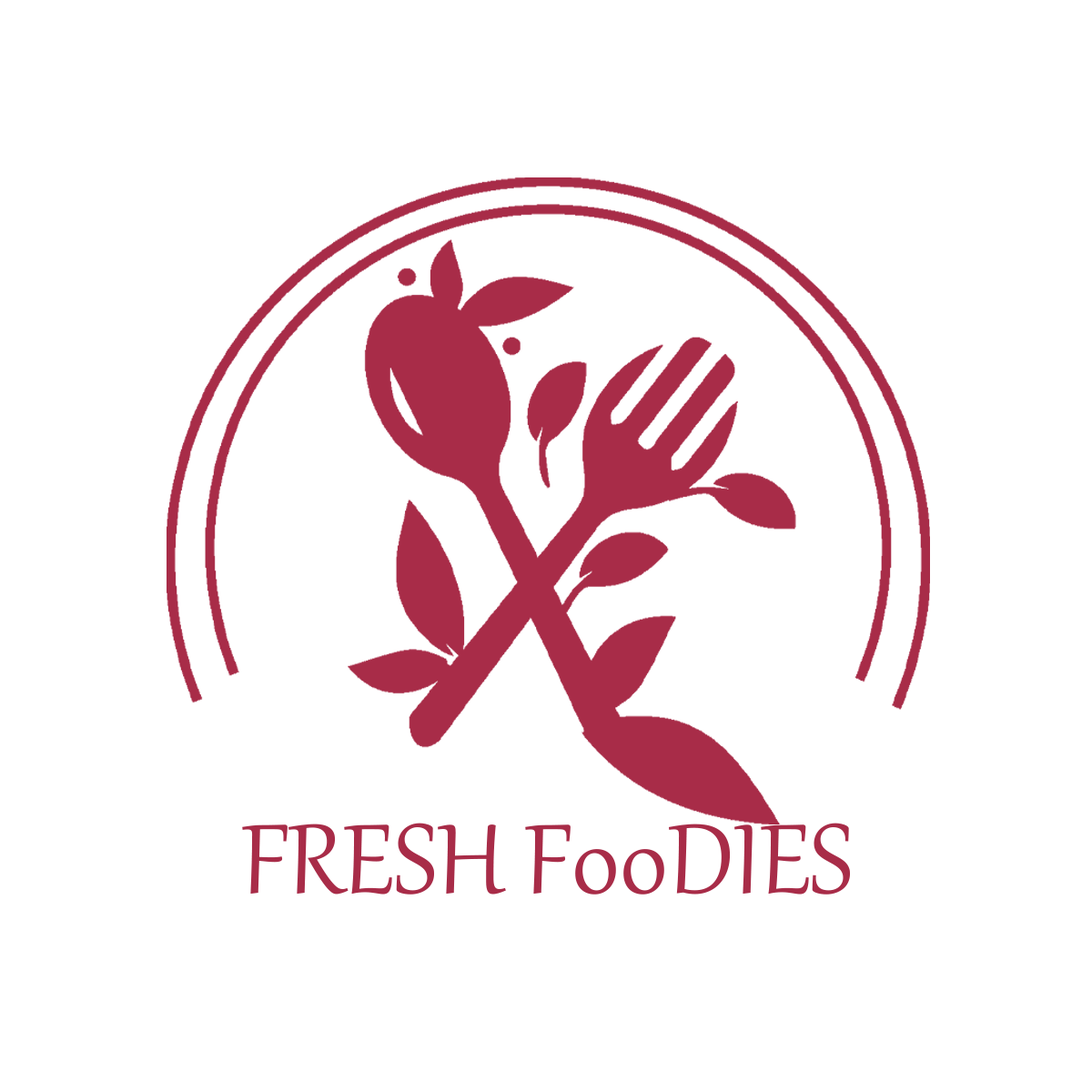
<style>
.page{position:relative;width:1092px;height:1092px;background:#ffffff}
.page>*{position:absolute;margin:0}
.t1{font:120.7px "Gabriola";color:#a82c48}
</style>
<div class="page">
<p class="t1" style="left:242px;top:823px;width:608px;height:72px">FRESH F00DIES</p>
</div>
